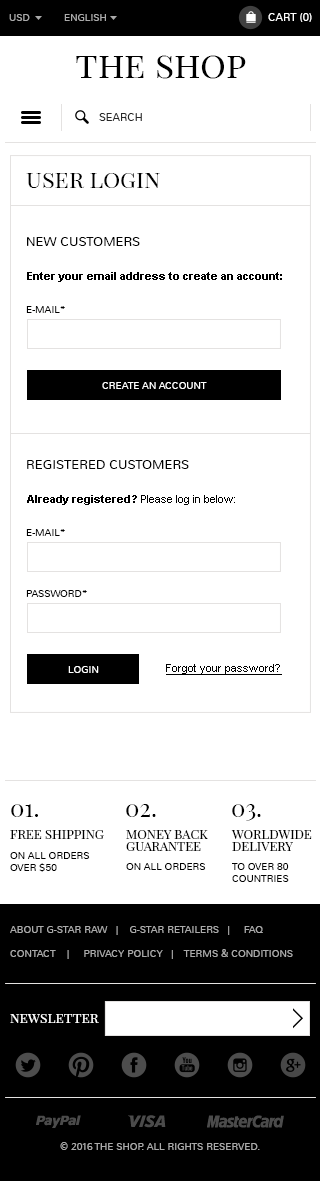
<style>
.page{position:relative;width:320px;height:1181px;background:#ffffff}
.page>*{position:absolute;margin:0}
.t1{font:10px "Nunito-Light";color:#aaaaaa;text-transform:uppercase}
.t2{font:11px "Nunito-Light";color:#ffffff;text-transform:uppercase}
.t3{font:36px "PlayfairDisplaySC-Regular";color:#000000}
.t4{font:11px "Nunito-Light";color:#282828;text-transform:uppercase}
.t5{font:24px "PlayfairDisplaySC-Regular";color:#000000}
.t6{font:13px "Nunito-Light";color:#000000;text-transform:uppercase}
.t7{font:11px "Arial-BoldMT";color:#000000}
.t8{font:10px "Nunito-Light";color:#000000;text-transform:uppercase}
.t9{font:10px "Nunito-Light";color:#ffffff;text-transform:uppercase}
.t10{font:11px "ArialMT";color:#000000}
.t11{font:11px "ArialMT";color:#000000;text-decoration:underline}
.t12{font:13px "PlayfairDisplaySC-Regular";color:#000000;text-transform:uppercase}
.t13{font:13px/12px "PlayfairDisplaySC-Regular";color:#000000;text-transform:uppercase}
.t14{font:10px/24px "Nunito-Light";color:#aaaaaa;text-transform:uppercase}
.t15{font:14px "PlayfairDisplaySC-Regular";color:#ffffff}
</style>
<div class="page">
<p class="t1" style="left:9px;top:14px;width:21px;height:7px">usD</p>
<p class="t1" style="left:64px;top:14px;width:42px;height:7px">English</p>
<p class="t2" style="left:268px;top:13px;width:44px;height:9px">Cart (0)</p>
<p class="t3" style="left:76px;top:55px;width:170px;height:24px">the shop</p>
<p class="t4" style="left:99px;top:113px;width:43px;height:8px">search</p>
<p class="t5" style="left:26px;top:173px;width:134px;height:15px">user login</p>
<p class="t6" style="left:27px;top:237px;width:113px;height:9px">new customers</p>
<p class="t7" style="left:27px;top:272px;width:255px;height:10px">Enter your email address to create an account:</p>
<p class="t8" style="left:26px;top:306px;width:39px;height:7px">e-mail*</p>
<p class="t9" style="left:102px;top:382px;width:105px;height:7px">create an account</p>
<p class="t6" style="left:27px;top:460px;width:162px;height:9px">registered customers</p>
<p class="t10" style="left:27px;top:495px;width:208px;height:10px"><span class="t7">Already registered?</span> Please log in below:</p>
<p class="t8" style="left:26px;top:529px;width:39px;height:7px">e-mail*</p>
<p class="t8" style="left:26px;top:590px;width:61px;height:7px">password*</p>
<p class="t11" style="left:166px;top:664px;width:116px;height:11px">Forgot your password?</p>
<p class="t9" style="left:68px;top:666px;width:31px;height:7px">login</p>
<p class="t5" style="left:11px;top:804px;width:27px;height:13px">01.</p>
<p class="t5" style="left:126px;top:804px;width:30px;height:13px">02.</p>
<p class="t5" style="left:232px;top:804px;width:29px;height:17px">03.</p>
<p class="t12" style="left:10px;top:830px;width:94px;height:9px">Free Shipping</p>
<p class="t13" style="left:126px;top:830px;width:82px;height:21px">Money back<br>guarantee</p>
<p class="t13" style="left:231px;top:830px;width:81px;height:21px">Worldwide<br>Delivery</p>
<p class="t8" style="left:10px;top:852px;width:80px;height:20px">On all orders<br>over $50</p>
<p class="t8" style="left:126px;top:863px;width:80px;height:7px">On all orders</p>
<p class="t8" style="left:232px;top:863px;width:57px;height:19px">To over 80<br>countries</p>
<p class="t14" style="left:10px;top:926px;width:283px;height:33px">About G-Star Raw   |    G-Star Retailers   |     FAQ<br>Contact    |     Privacy Policy   |    Terms &amp; Conditions</p>
<p class="t15" style="left:10px;top:1014px;width:89px;height:9px">newsletter</p>
<p class="t1" style="left:60px;top:1142px;width:200px;height:8px">© 2016 the shop. All Rights Reserved.</p>
</div>
